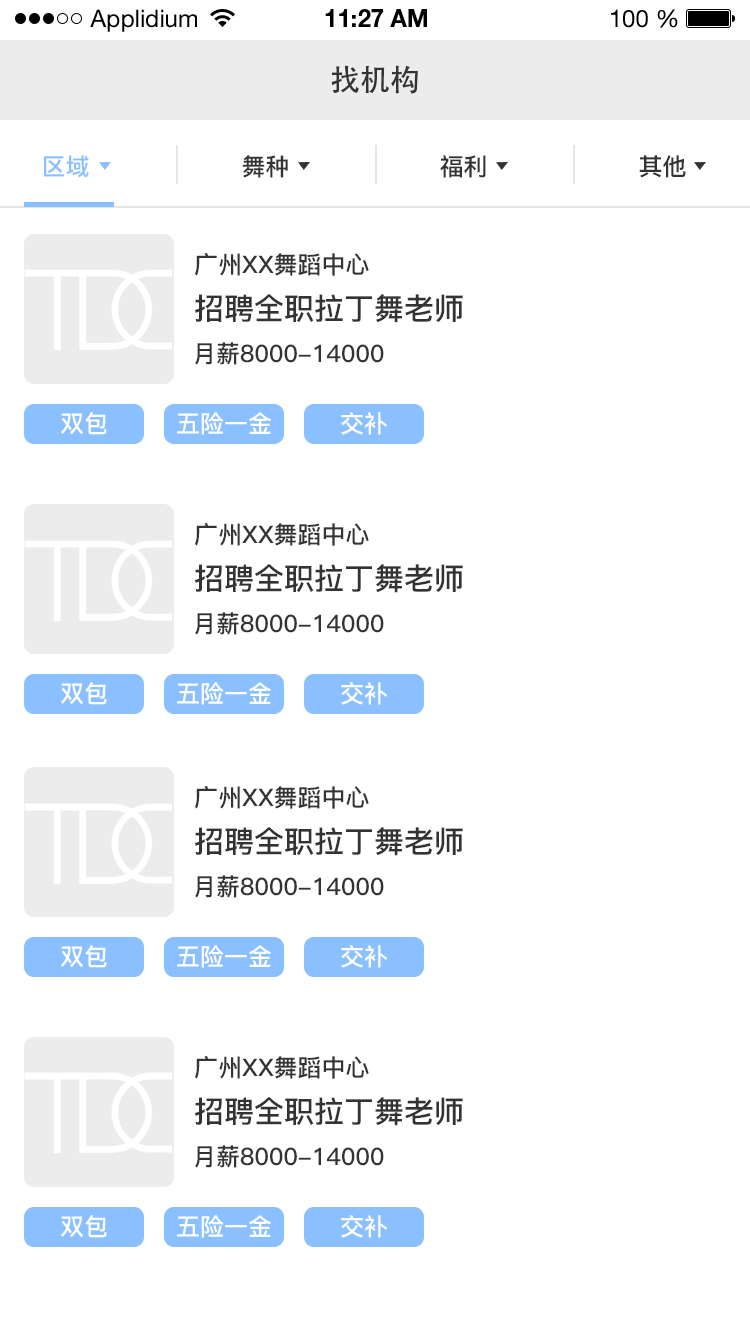
<style>
.page{position:relative;width:750px;height:1334px;background:#ffffff}
.page>*{position:absolute;margin:0}
.t1{font:24px "HelveticaNeueLTStd-Roman";color:#000000}
.t2{font:24px "HelveticaNeueLTStd-Bd";color:#000000}
.t3{font:30px "AdobeHeitiStd-Regular";color:#333333}
.t4{font:24px "PingFang-SC-Bold";color:#8ac0ff}
.t5{font:24px "PingFang-SC-Bold";color:#333333}
.t6{font:30px "PingFang-SC-Bold";color:#333333}
.t7{font:24px "PingFang-SC-Bold";color:#ffffff}
</style>
<div class="page">
<p class="t1" style="left:90px;top:9px;width:107px;height:23px">Applidium</p>
<p class="t2" style="left:325px;top:9px;width:102px;height:18px">11:27 AM</p>
<p class="t1" style="left:611px;top:9px;width:67px;height:19px">100 %</p>
<p class="t3" style="left:331px;top:65px;width:87px;height:29px">找机构</p>
<p class="t4" style="left:44px;top:155px;width:45px;height:23px">区域</p>
<p class="t5" style="left:242px;top:155px;width:46px;height:23px">舞种</p>
<p class="t5" style="left:440px;top:155px;width:46px;height:23px">福利</p>
<p class="t5" style="left:639px;top:155px;width:47px;height:23px">其他</p>
<p class="t5" style="left:195px;top:253px;width:174px;height:23px">广州XX舞蹈中心</p>
<p class="t6" style="left:195px;top:294px;width:268px;height:29px">招聘全职拉丁舞老师</p>
<p class="t5" style="left:195px;top:342px;width:189px;height:23px">月薪8000-14000</p>
<p class="t7" style="left:61px;top:412px;width:46px;height:23px">双包</p>
<p class="t7" style="left:177px;top:412px;width:94px;height:23px">五险一金</p>
<p class="t7" style="left:341px;top:412px;width:46px;height:23px">交补</p>
<p class="t5" style="left:195px;top:523px;width:174px;height:23px">广州XX舞蹈中心</p>
<p class="t6" style="left:195px;top:564px;width:268px;height:29px">招聘全职拉丁舞老师</p>
<p class="t5" style="left:195px;top:612px;width:189px;height:23px">月薪8000-14000</p>
<p class="t7" style="left:61px;top:682px;width:46px;height:23px">双包</p>
<p class="t7" style="left:177px;top:682px;width:94px;height:23px">五险一金</p>
<p class="t7" style="left:341px;top:682px;width:46px;height:23px">交补</p>
<p class="t5" style="left:195px;top:786px;width:174px;height:23px">广州XX舞蹈中心</p>
<p class="t6" style="left:195px;top:827px;width:268px;height:29px">招聘全职拉丁舞老师</p>
<p class="t5" style="left:195px;top:875px;width:189px;height:23px">月薪8000-14000</p>
<p class="t7" style="left:61px;top:945px;width:46px;height:23px">双包</p>
<p class="t7" style="left:177px;top:945px;width:94px;height:23px">五险一金</p>
<p class="t7" style="left:341px;top:945px;width:46px;height:23px">交补</p>
<p class="t5" style="left:195px;top:1056px;width:174px;height:23px">广州XX舞蹈中心</p>
<p class="t6" style="left:195px;top:1097px;width:268px;height:29px">招聘全职拉丁舞老师</p>
<p class="t5" style="left:195px;top:1145px;width:189px;height:23px">月薪8000-14000</p>
<p class="t7" style="left:61px;top:1215px;width:46px;height:23px">双包</p>
<p class="t7" style="left:177px;top:1215px;width:94px;height:23px">五险一金</p>
<p class="t7" style="left:341px;top:1215px;width:46px;height:23px">交补</p>
</div>
